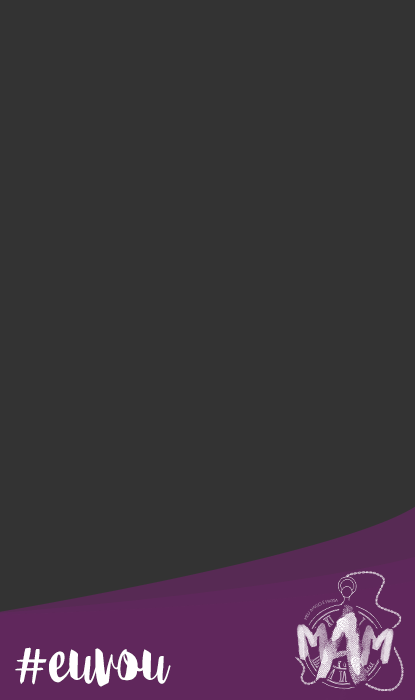
<style>
.page{position:relative;width:415px;height:700px;background:#333333}
.page>*{position:absolute;margin:0}
.t1{font:57px "Stonestickfreetester";color:#ffffff}
</style>
<div class="page">
<p class="t1" style="left:15px;top:647px;width:156px;height:40px">#euvou</p>
</div>
